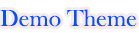
<style>
.page{position:relative;width:139px;height:33px;background:#ffffff}
.page>*{position:absolute;margin:0}
.t1{font:24px "BaskOldFace";color:#0650f8}
</style>
<div class="page">
<p class="t1" style="left:0px;top:9px;width:137px;height:18px">Demo Theme</p>
</div>
